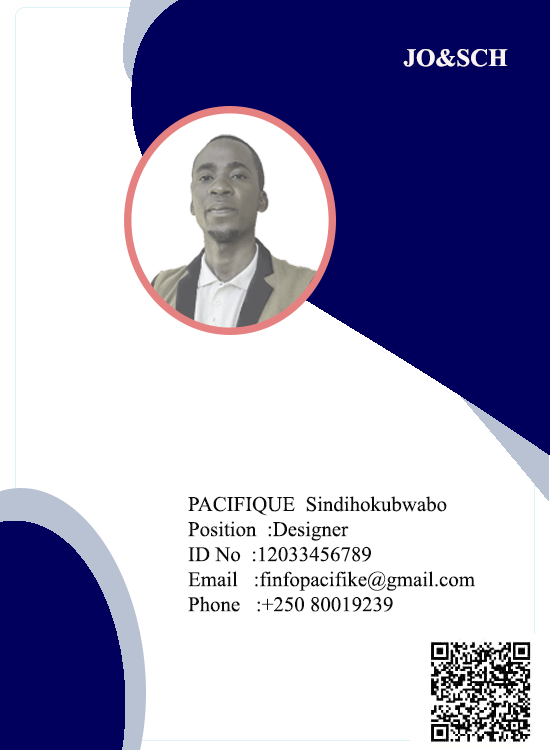
<style>
.page{position:relative;width:550px;height:750px;background:#ffffff}
.page>*{position:absolute;margin:0}
.t1{font:25px "TimesNewRomanPS-BoldMT";color:#f9f3f3}
.t2{font:20.9px "TimesNewRomanPSMT";color:#0c0c0e}
</style>
<div class="page">
<p class="t1" style="left:403px;top:49px;width:105px;height:18px">JO&amp;SCH</p>
<p class="t2" style="left:188px;top:496px;width:287px;height:116px">PACIFIQUE  Sindihokubwabo<br>Position  :Designer<br>ID No  :12033456789<br>Email   :finfopacifike@gmail.com<br>Phone   :+250 80019239</p>
</div>
